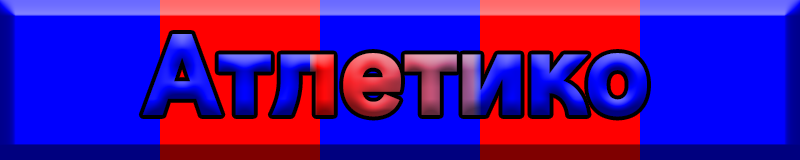
<style>
.page{position:relative;width:800px;height:160px;background:#0000ff}
.page>*{position:absolute;margin:0}
.t1{font:100px "MiSans-Heavy"}
</style>
<div class="page">
<p class="t1" style="left:142px;top:34px;width:505px;height:83px">Атлетико</p>
</div>
